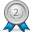
<style>
.page{position:relative;width:32px;height:32px;background:#ffffff}
.page>*{position:absolute;margin:0}
.t1{font:11px "MyriadPro-Regular";letter-spacing:0.05em;color:#727272;text-transform:uppercase}
</style>
<div class="page">
<p class="t1" style="left:13px;top:8px;width:6px;height:8px">2</p>
</div>
